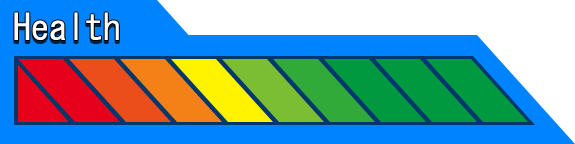
<style>
.page{position:relative;width:575px;height:144px;background:#0083ff}
.page>*{position:absolute;margin:0}
.t1{font:36px "MS-Gothic";color:#ffffff}
</style>
<div class="page">
<p class="t1" style="left:14px;top:12px;width:105px;height:28px">Health</p>
</div>
